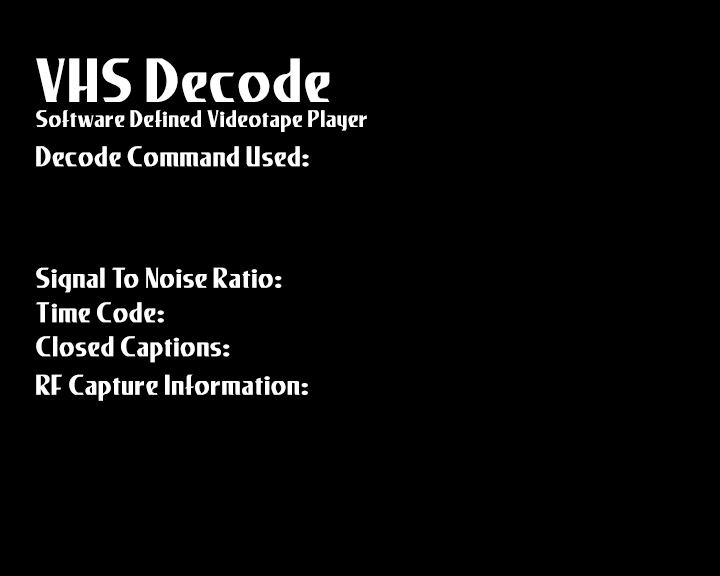
<style>
.page{position:relative;width:720px;height:576px;background:#000000}
.page>*{position:absolute;margin:0}
.t1{font:25px/25px "LesterBold";color:#ffffff;scale:0.91 1}
.t2{font:65px/18px "LesterBold";color:#ffffff;scale:0.91 1}
.t3{font:30px "LesterBold";color:#ffffff;scale:0.91 1}
</style>
<div class="page">
<p class="t1" style="left:36px;top:58px;width:331px;height:74px"><span class="t2">VHS Decode<br></span>Software Defined Videotape Player</p>
<p class="t3" style="left:36px;top:146px;width:273px;height:21px">Decode Command Used:</p>
<p class="t3" style="left:36px;top:267px;width:246px;height:26px">Signal To Noise Ratio:</p>
<p class="t3" style="left:36px;top:302px;width:128px;height:21px">Time Code:</p>
<p class="t3" style="left:36px;top:336px;width:194px;height:27px">Closed Captions:</p>
<p class="t3" style="left:36px;top:374px;width:272px;height:27px">RF Capture Information:</p>
</div>
